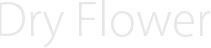
<style>
.page{position:relative;width:211px;height:48px;background:#ffffff}
.page>*{position:absolute;margin:0}
.t1{font:45px "KozGoPro-Light";color:#e7e7e9}
</style>
<div class="page">
<p class="t1" style="left:0px;top:0px;width:211px;height:48px">Dry Flower</p>
</div>
